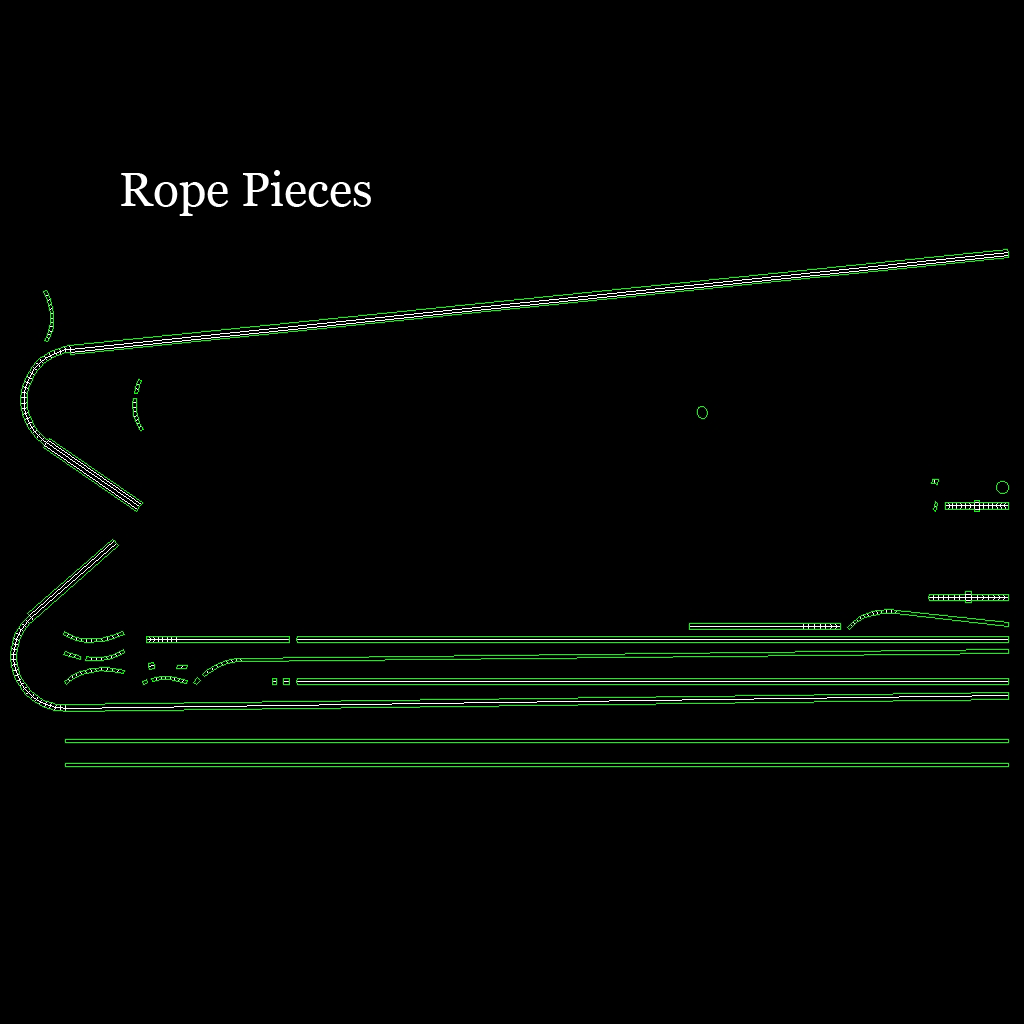
<style>
.page{position:relative;width:1024px;height:1024px;background:#000000}
.page>*{position:absolute;margin:0}
.t1{font:48px "Georgia";color:#ffffff}
</style>
<div class="page">
<p class="t1" style="left:121px;top:170px;width:250px;height:46px">Rope Pieces</p>
</div>
